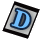
<style>
.page{position:relative;width:42px;height:43px;background:#ffffff}
.page>*{position:absolute;margin:0}
.t1{font:22px "RyuminPro-ExBold";color:#71bdfc;font-weight:bold}
</style>
<div class="page">
<p class="t1" style="left:11px;top:9px;width:19px;height:19px;rotate:19deg">D</p>
</div>
